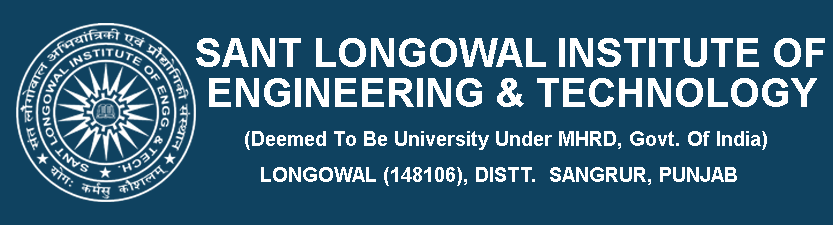
<style>
.page{position:relative;width:833px;height:225px;background:#0f4260}
.page>*{position:absolute;margin:0}
.t1{font:40px/40px "Arial-BoldMT";color:#ffffff;text-transform:uppercase}
.t2{font:20px "Arial-BoldMT";color:#ffffff}
.t3{font:20px "Arial-BoldMT";color:#ffffff;text-transform:uppercase}
</style>
<div class="page">
<p class="t1" style="left:196px;top:38px;width:629px;height:69px;text-align:center">Sant Longowal institute of<br>engInEERING &amp; technology</p>
<p class="t2" style="left:245px;top:131px;width:522px;height:19px">(Deemed To Be University Under MHRD, Govt. Of India)</p>
<p class="t3" style="left:261px;top:167px;width:476px;height:19px">LONGOWAL (148106), DISTT.  SANGRUR, PUNJAB</p>
</div>
